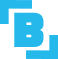
<style>
.page{position:relative;width:58px;height:59px;background:#24b8eb}
.page>*{position:absolute;margin:0}
.t1{font:50px "MonsterBites";letter-spacing:-0.025em;color:#24b8eb}
</style>
<div class="page">
<p class="t1" style="left:14px;top:12px;width:30px;height:35px">b</p>
</div>
